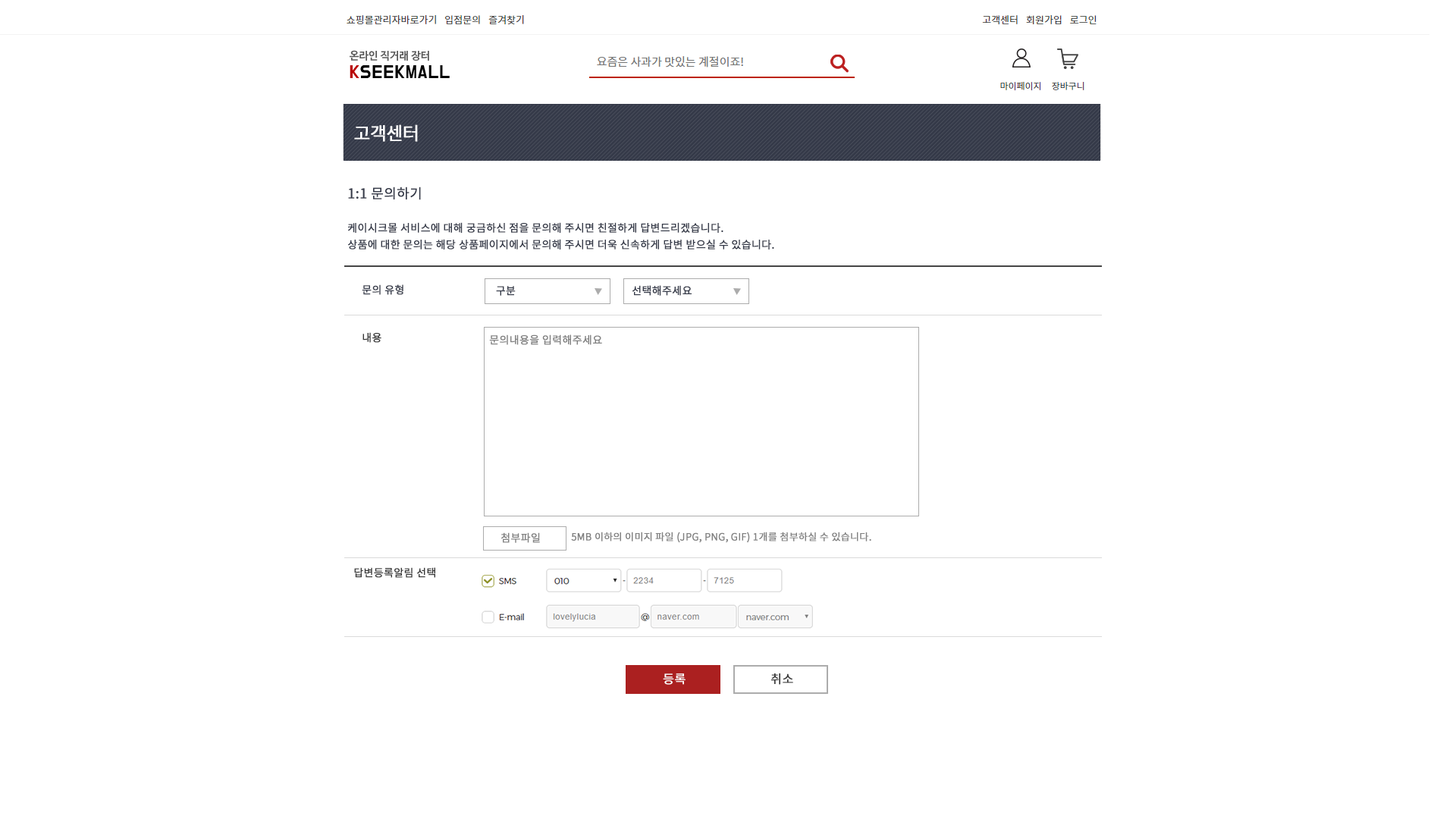
<style>
.page{position:relative;width:1456px;height:819px;background:#ffffff}
.page>*{position:absolute;margin:0}
.t1{font:18.2px "NotoSansCJKkr-Regular";letter-spacing:-0.05em;color:#ffffff;font-weight:bold}
.t2{font:10.6px/16.7px "NotoSansCJKkr-Regular";color:#353a49;font-weight:bold}
.t3{font:13.6px/16.7px "NotoSansCJKkr-Regular";color:#353a49;font-weight:bold}
.t4{font:10.6px "NotoSansCJKkr-Regular";color:#353a49;font-weight:bold}
.t5{font:10.6px "NotoSansCJKkr-Regular";color:#383838;font-weight:bold}
.t6{font:10.6px "NotoSansCJKkr-Regular";color:#818181;font-weight:bold}
.t7{font:9.9px "NotoSansCJKkr-Regular";color:#818181;font-weight:bold}
.t8{font:12.1px "NotoSansCJKkr-Regular";color:#ffffff;font-weight:bold}
.t9{font:12.1px "NotoSansCJKkr-Regular";color:#383838;font-weight:bold}
</style>
<div class="page">
<p class="t1" style="left:354px;top:124px;width:64px;height:18px">고객센터</p>
<p class="t2" style="left:348px;top:187px;width:426px;height:62px"><span class="t3">1:1 문의하기<br><br></span>케이시크몰 서비스에 대해 궁금하신 점을 문의해 주시면 친절하게 답변드리겠습니다.<br>상품에 대한 문의는 해당 상품페이지에서 문의해 주시면 더욱 신속하게 답변 받으실 수 있습니다.</p>
<p class="t4" style="left:362px;top:284px;width:41px;height:11px">문의 유형</p>
<p class="t4" style="left:496px;top:286px;width:20px;height:10px">구분</p>
<p class="t4" style="left:632px;top:285px;width:60px;height:11px">선택해주세요</p>
<p class="t5" style="left:362px;top:332px;width:19px;height:11px">내용</p>
<p class="t6" style="left:489px;top:334px;width:113px;height:11px">문의내용을 입력해주세요</p>
<p class="t6" style="left:500px;top:532px;width:40px;height:11px">첨부파일</p>
<p class="t7" style="left:571px;top:532px;width:300px;height:11px">5MB 이하의 이미지 파일 (JPG, PNG, GIF) 1개를 첨부하실 수 있습니다.</p>
<p class="t5" style="left:354px;top:567px;width:81px;height:11px">답변등록알림 선택</p>
<p class="t8" style="left:663px;top:673px;width:23px;height:12px">등록</p>
<p class="t9" style="left:770px;top:673px;width:23px;height:12px">취소</p>
</div>
